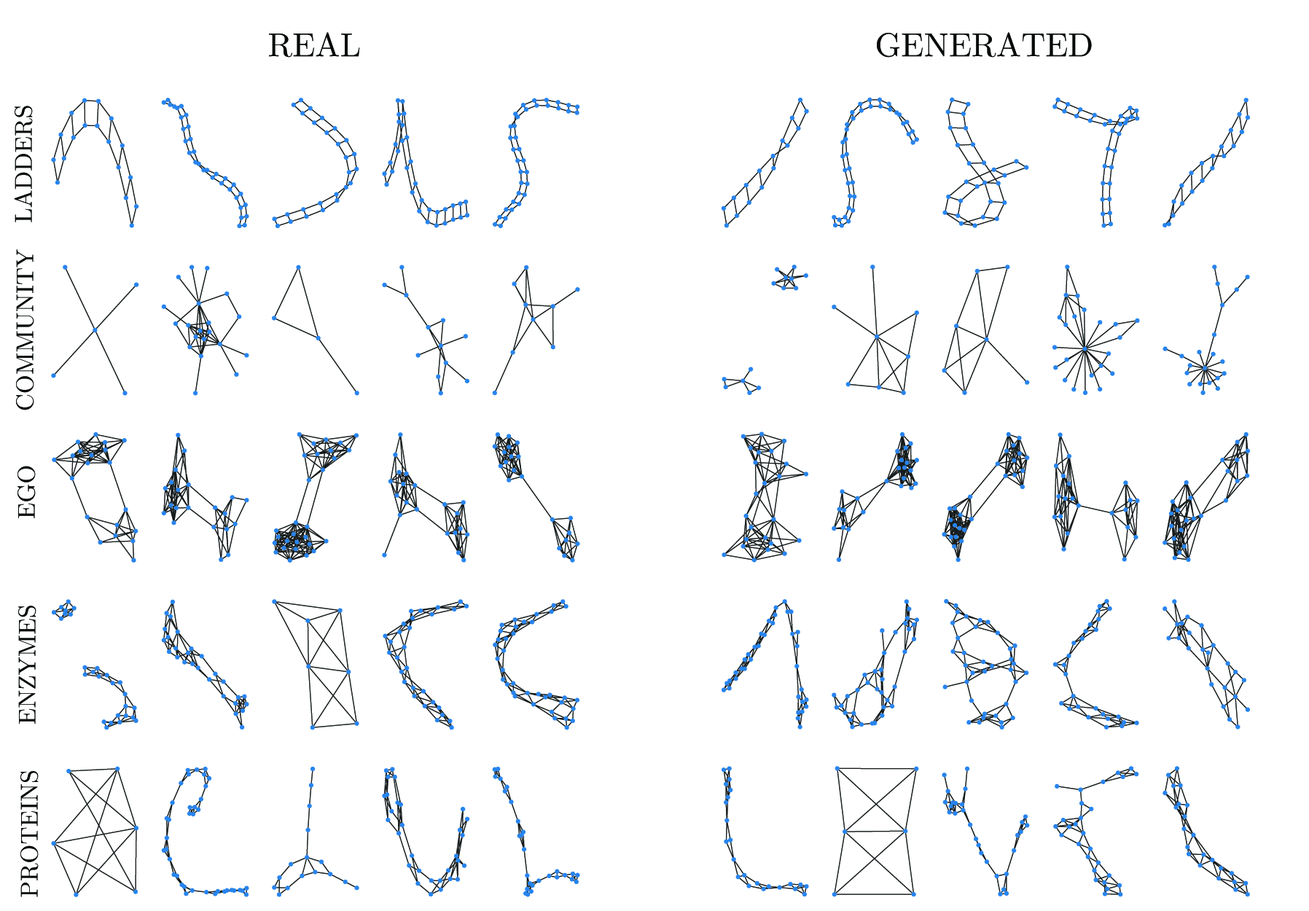
<style>
.page{position:relative;width:1309px;height:911px;background:#ffffff}
.page>*{position:absolute;margin:0}
.t1{font:33.4px "CMUSerif-Roman";color:#060808}
.t2{font:24.3px "CMUSerif-Roman";color:#060808}
</style>
<div class="page">
<p class="t1" style="left:269px;top:32px;width:91px;height:26px">REAL</p>
<p class="t1" style="left:877px;top:32px;width:215px;height:26px">GENERATED</p>
<p class="t2" style="left:14px;top:106px;width:19px;height:116px;rotate:-90deg">LADDERS</p>
<p class="t2" style="left:16px;top:249px;width:18px;height:161px;rotate:-90deg">COMMUNITY</p>
<p class="t2" style="left:17px;top:466px;width:19px;height:52px;rotate:-90deg">EGO</p>
<p class="t2" style="left:18px;top:606px;width:18px;height:118px;rotate:-90deg">ENZYMES</p>
<p class="t2" style="left:20px;top:771px;width:19px;height:126px;rotate:-90deg">PROTEINS</p>
</div>
